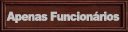
<style>
.page{position:relative;width:128px;height:32px}
.page>*{position:absolute;margin:0}
.t1{font:12px "Arial-Black";letter-spacing:-0.05em;color:#c0c0c0;scale:0.89 1}
</style>
<div class="page">
<p class="t1" style="left:6px;top:11px;width:114px;height:12px">Apenas Funcionários</p>
</div>
